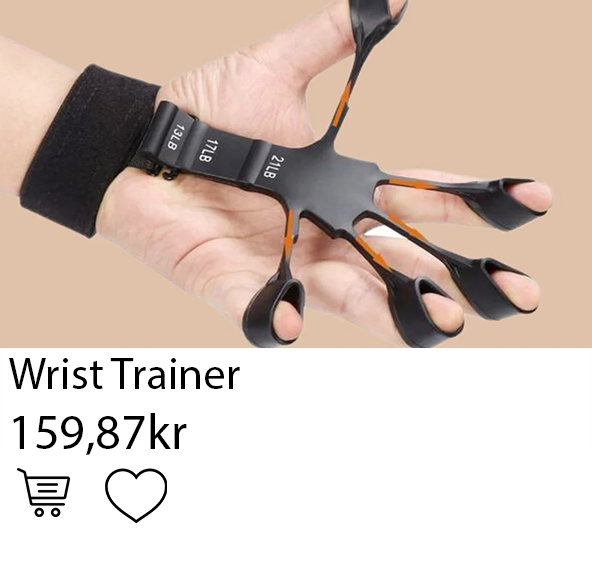
<style>
.page{position:relative;width:592px;height:567px;background:#ffffff}
.page>*{position:absolute;margin:0}
.t1{font:50px "MyriadPro-Regular";color:#000000}
.t2{font:45px "MyriadPro-Regular";color:#000000}
</style>
<div class="page">
<p class="t1" style="left:9px;top:358px;width:231px;height:97px"><span class="t2">Wrist Trainer<br></span>159,87kr<br>128,45kr</p>
</div>
